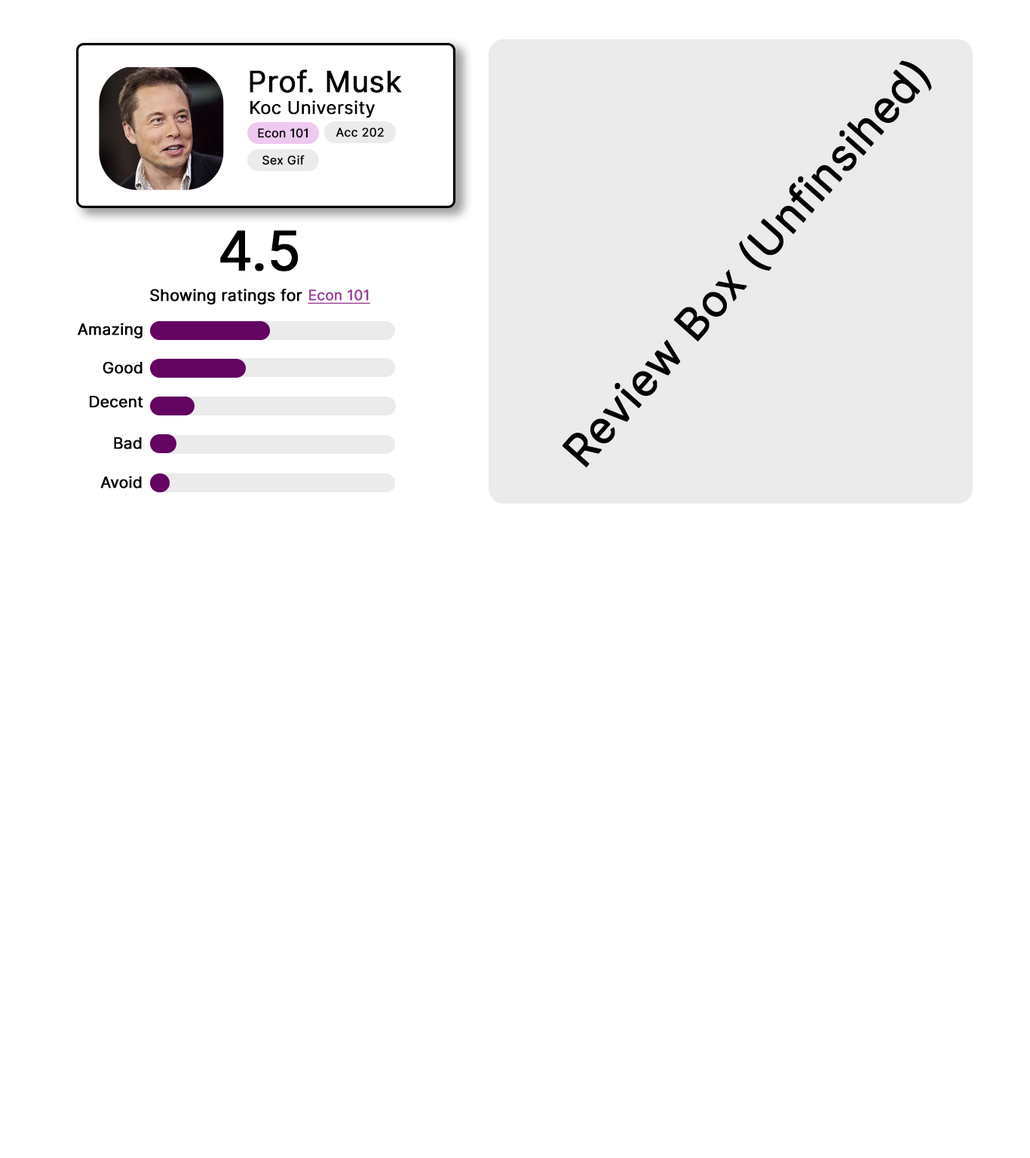
<style>
.page{position:relative;width:1030px;height:1158px;background:#ffffff}
.page>*{position:absolute;margin:0}
.t1{font:43.6px "Inter-Regular";color:#000000;font-weight:bold}
.t2{font:29.3px "Inter-Regular";color:#000000;font-weight:bold}
.t3{font:17.7px "Inter-Regular";color:#000000;font-weight:bold}
.t4{font:11.8px "Inter-Regular";color:#000000;font-weight:bold}
.t5{font:54.3px "Inter-Regular";color:#000000;font-weight:bold}
.t6{font:15.8px "Inter-Regular";color:#000000;font-weight:bold}
.t7{font:14.1px "Inter-Regular";color:#993c96;font-weight:bold;text-decoration:underline}
.t8{font:15.5px "Inter-Regular";color:#000000;font-weight:bold}
</style>
<div class="page">
<p class="t1" style="left:562px;top:60px;width:370px;height:407px;rotate:-48deg">Review Box (Unfinsihed)</p>
<p class="t2" style="left:250px;top:69px;width:152px;height:24px">Prof. Musk</p>
<p class="t3" style="left:250px;top:100px;width:125px;height:18px">Koc University</p>
<p class="t4" style="left:258px;top:128px;width:50px;height:10px">Econ 101</p>
<p class="t4" style="left:335px;top:127px;width:49px;height:10px">Acc 202</p>
<p class="t4" style="left:262px;top:155px;width:43px;height:10px">Sex Gif</p>
<p class="t5" style="left:220px;top:230px;width:78px;height:41px">4.5</p>
<p class="t6" style="left:150px;top:289px;width:152px;height:16px">Showing ratings for</p>
<p class="t7" style="left:308px;top:289px;width:62px;height:15px">Econ 101</p>
<p class="t8" style="left:78px;top:323px;width:64px;height:15px">Amazing</p>
<p class="t8" style="left:103px;top:362px;width:39px;height:12px">Good</p>
<p class="t8" style="left:90px;top:396px;width:53px;height:12px">Decent</p>
<p class="t8" style="left:114px;top:437px;width:28px;height:12px">Bad</p>
<p class="t8" style="left:100px;top:476px;width:42px;height:13px">Avoid</p>
</div>
